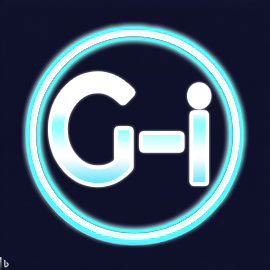
<style>
.page{position:relative;width:270px;height:270px;background:#0f112a}
.page>*{position:absolute;margin:0}
.t1{font:135px "CaviarDreams-Bold";letter-spacing:-0.025em;scale:0.85 1}
</style>
<div class="page">
<p class="t1" style="left:52px;top:75px;width:156px;height:109px">G-i</p>
</div>
